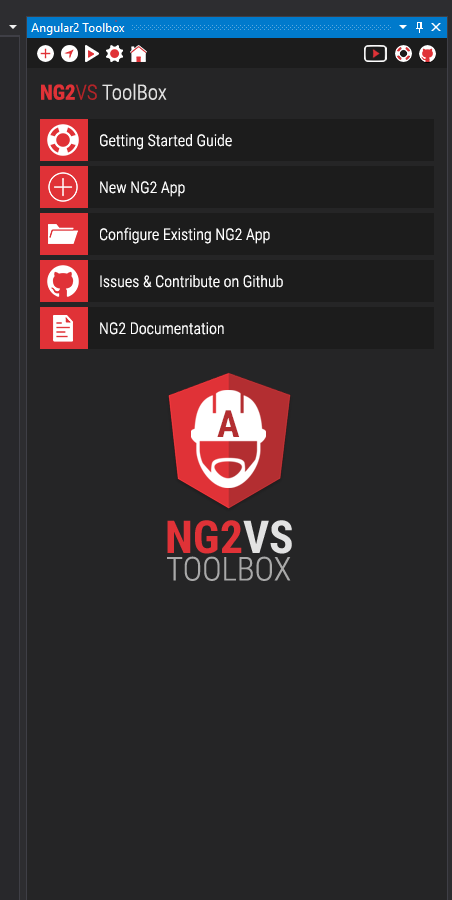
<style>
.page{position:relative;width:452px;height:900px;background:#252526}
.page>*{position:absolute;margin:0}
.t1{font:20.9px "RobotoCondensed-Light";color:#e2e2e2}
.t2{font:20.9px "RobotoCondensed-Bold";color:#e03237}
.t3{font:20.9px "RobotoCondensed-Light";color:#b42428}
.t4{font:16px "RobotoCondensed-Light";color:#ffffff}
</style>
<div class="page">
<p class="t1" style="left:41px;top:83px;width:126px;height:17px"><span class="t2">NG2</span><span class="t3">VS </span>ToolBox</p>
<p class="t4" style="left:100px;top:134px;width:132px;height:16px">Getting Started Guide</p>
<p class="t4" style="left:100px;top:181px;width:85px;height:16px">New NG2 App</p>
<p class="t4" style="left:100px;top:227px;width:170px;height:17px">Configure Existing NG2 App</p>
<p class="t4" style="left:100px;top:275px;width:183px;height:13px">Issues &amp; Contribute on Github</p>
<p class="t4" style="left:100px;top:322px;width:124px;height:13px">NG2 Documentation</p>
</div>
